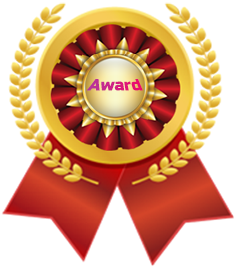
<style>
.page{position:relative;width:237px;height:268px;background:#ffffff}
.page>*{position:absolute;margin:0}
.t1{font:16px "RussoOne-Regular"}
</style>
<div class="page">
<p class="t1" style="left:86px;top:79px;width:57px;height:12px">Award</p>
</div>
